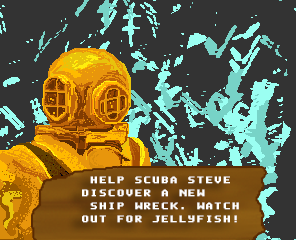
<style>
.page{position:relative;width:296px;height:240px;background:#333333}
.page>*{position:absolute;margin:0}
.t1{font:7.5px/13px "DeluxeFontReg";letter-spacing:0.08em;color:#ffffff;font-weight:bold;scale:1.06 1}
</style>
<div class="page">
<p class="t1" style="left:82px;top:176px;width:157px;height:47px">HELP SCUBA STEVE<br>DISCOVER A NEW<br> SHIP WRECK. WATCH<br>OUT FOR JELLYFISH!</p>
</div>
